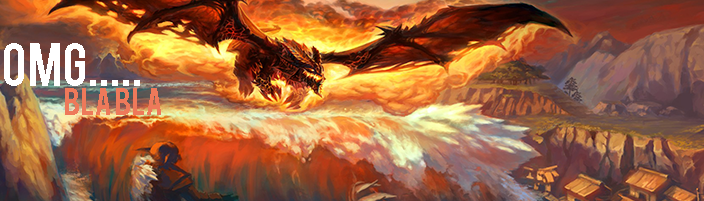
<style>
.page{position:relative;width:704px;height:201px}
.page>*{position:absolute;margin:0}
.t1{font:48px "Bebas";color:#ffffff}
.t2{font:30px "Bebas";color:#ee795a}
</style>
<div class="page">
<p class="t1" style="left:4px;top:43px;width:136px;height:43px">omg.....</p>
<p class="t2" style="left:65px;top:88px;width:96px;height:27px">bla bla</p>
</div>
